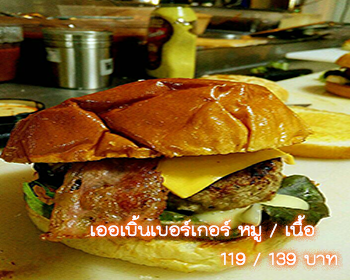
<style>
.page{position:relative;width:350px;height:280px}
.page>*{position:absolute;margin:0}
.t1{font:24px "THKodchasal";color:#ffffff}
</style>
<div class="page">
<p class="t1" style="left:90px;top:215px;width:248px;height:52px;text-align:right">เออเบิ้นเบอร์เกอร์ หมู / เนื้อ<br>บาท 139 / 119</p>
</div>
